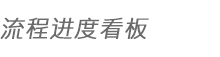
<style>
.page{position:relative;width:220px;height:57px;background:#ffffff}
.page>*{position:absolute;margin:0}
.t1{font:24px "MicrosoftJhengHeiRegular";color:#6b6b6b;font-weight:bold;font-style:italic}
</style>
<div class="page">
<p class="t1" style="left:0px;top:17px;width:149px;height:23px">流程进度看板</p>
</div>
